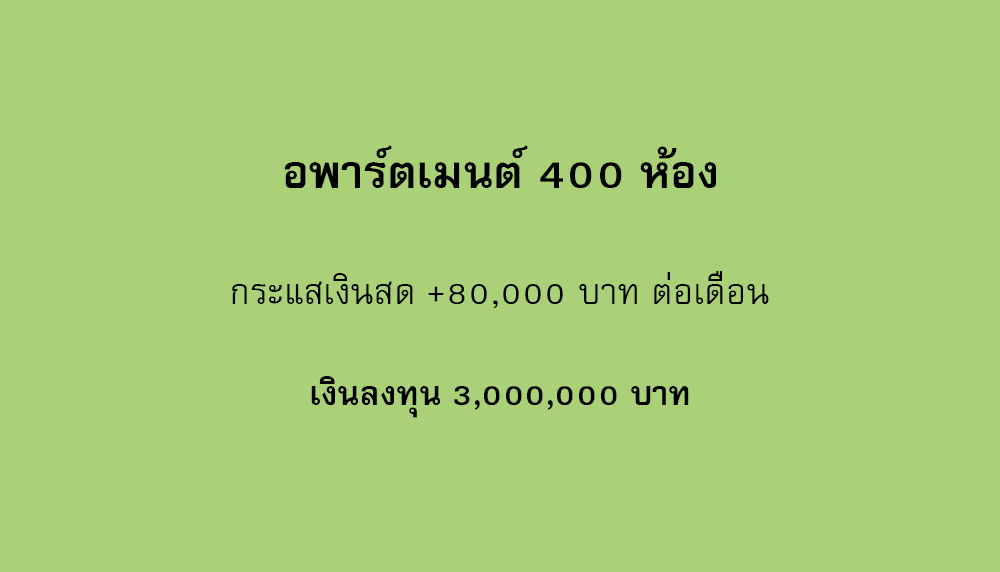
<style>
.page{position:relative;width:1000px;height:572px;background:#aad178}
.page>*{position:absolute;margin:0}
.t1{font:64px "FreesiaUPCBold";color:#000000}
.t2{font:50px "FreesiaUPC";color:#000000}
.t3{font:47px "FreesiaUPCBold";color:#000000}
</style>
<div class="page">
<p class="t1" style="left:284px;top:145px;width:432px;height:43px">อพาร์ตเมนต์ 400 ห้อง</p>
<p class="t2" style="left:232px;top:271px;width:537px;height:38px">กระแสเงินสด +80,000 บาท ต่อเดือน</p>
<p class="t3" style="left:311px;top:376px;width:378px;height:42px">เงินลงทุน 3,000,000 บาท</p>
</div>
